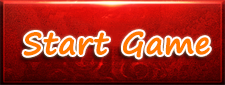
<style>
.page{position:relative;width:225px;height:85px}
.page>*{position:absolute;margin:0}
.t1{font:30px "SegoePrint-Bold";color:#ff7800;font-weight:bold}
</style>
<div class="page">
<p class="t1" style="left:23px;top:31px;width:187px;height:27px">Start Game</p>
</div>
